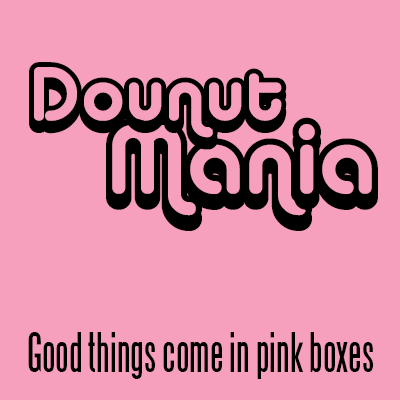
<style>
.page{position:relative;width:400px;height:400px;background:#f6a0bd}
.page>*{position:absolute;margin:0}
.t1{font:75.2px "AlbaSuper";color:#000000}
.t2{font:96.7px "AlbaSuper";color:#000000}
.t3{font:50px "Steelfish";color:#000000}
</style>
<div class="page">
<p class="t1" style="left:29px;top:62px;width:258px;height:88px">Dounut</p>
<p class="t2" style="left:106px;top:117px;width:272px;height:114px">Mania</p>
<p class="t3" style="left:28px;top:332px;width:346px;height:47px">Good things come in pink boxes</p>
</div>
